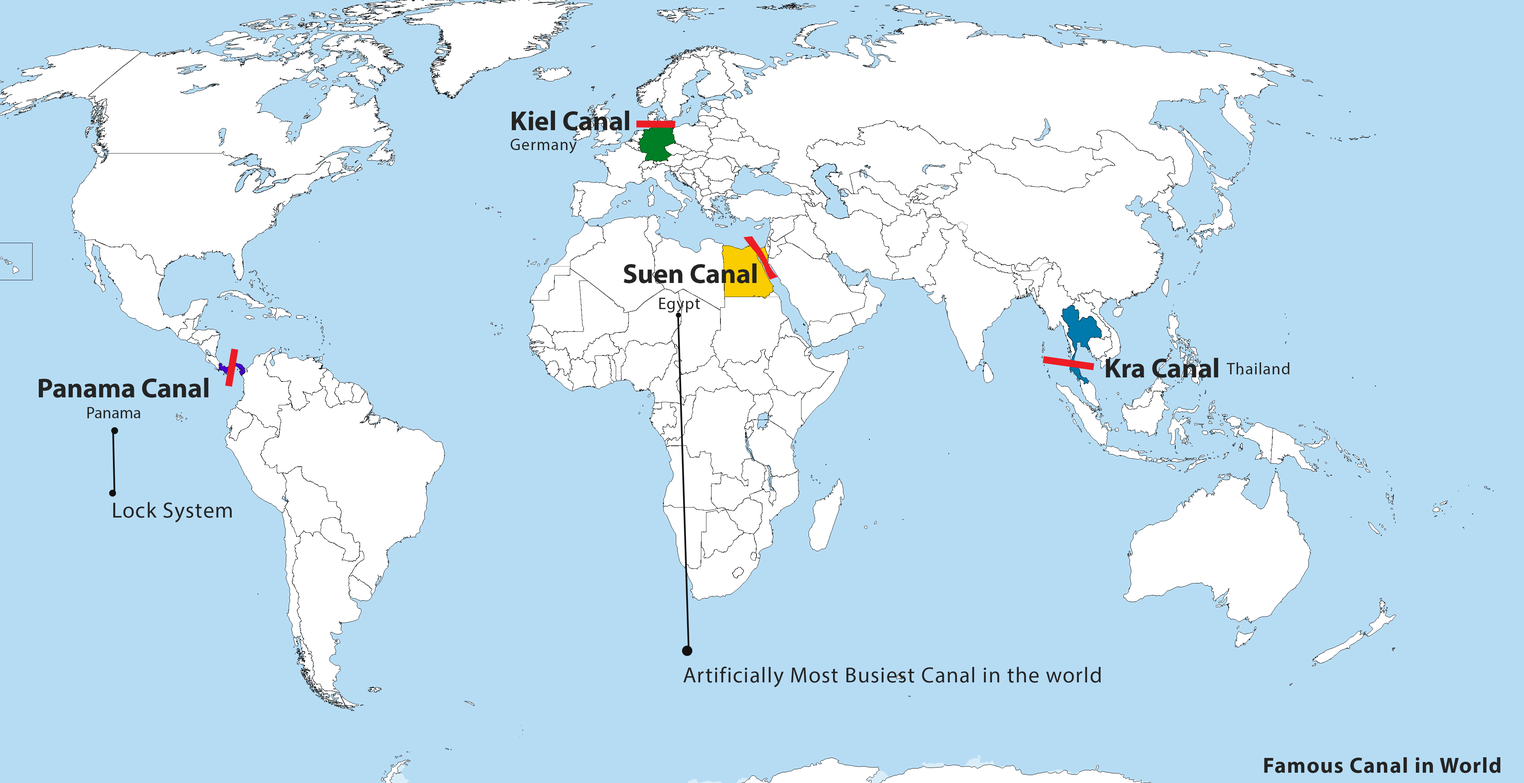
<style>
.page{position:relative;width:1524px;height:783px;background:#b6dcf4}
.page>*{position:absolute;margin:0}
.t1{font:27.5px "MyriadHebrew-Bold";color:#242424}
.t2{font:16.5px "MyriadHebrew-Regular";letter-spacing:0.04em;color:#242424}
.t3{font:16.5px "MyriadHebrew-Regular";color:#242424}
.t4{font:22px "MyriadHebrew-Regular";letter-spacing:0.04em;color:#242424}
.t5{font:22px "MyriadHebrew-Bold";letter-spacing:0.04em;color:#242424}
</style>
<div class="page">
<p class="t1" style="left:512px;top:111px;width:117px;height:19px">Kiel Canal</p>
<p class="t2" style="left:510px;top:139px;width:67px;height:14px">Germany</p>
<p class="t1" style="left:624px;top:263px;width:132px;height:20px">Suen Canal</p>
<p class="t2" style="left:659px;top:298px;width:41px;height:14px">Egypt</p>
<p class="t1" style="left:1106px;top:358px;width:112px;height:20px">Kra Canal</p>
<p class="t2" style="left:1227px;top:362px;width:62px;height:12px">Thailand</p>
<p class="t1" style="left:39px;top:378px;width:169px;height:19px">Panama Canal</p>
<p class="t3" style="left:87px;top:407px;width:53px;height:11px">Panama</p>
<p class="t4" style="left:113px;top:502px;width:119px;height:20px">Lock System</p>
<p class="t4" style="left:683px;top:666px;width:418px;height:21px">Artificially Most Busiest Canal in the world</p>
<p class="t5" style="left:1264px;top:757px;width:237px;height:16px">Famous Canal in World</p>
</div>
